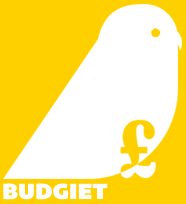
<style>
.page{position:relative;width:186px;height:204px;background:#ffd000}
.page>*{position:absolute;margin:0}
.t1{font:22.5px "Bemio";color:#ffffff}
</style>
<div class="page">
<p class="t1" style="left:3px;top:183px;width:105px;height:17px">BUDGIET</p>
</div>
